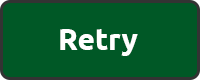
<style>
.page{position:relative;width:200px;height:80px;background:#005826}
.page>*{position:absolute;margin:0}
.t1{font:30px "Ubuntu-Bold";color:#ffffff}
</style>
<div class="page">
<p class="t1" style="left:60px;top:29px;width:78px;height:27px">Retry</p>
</div>
